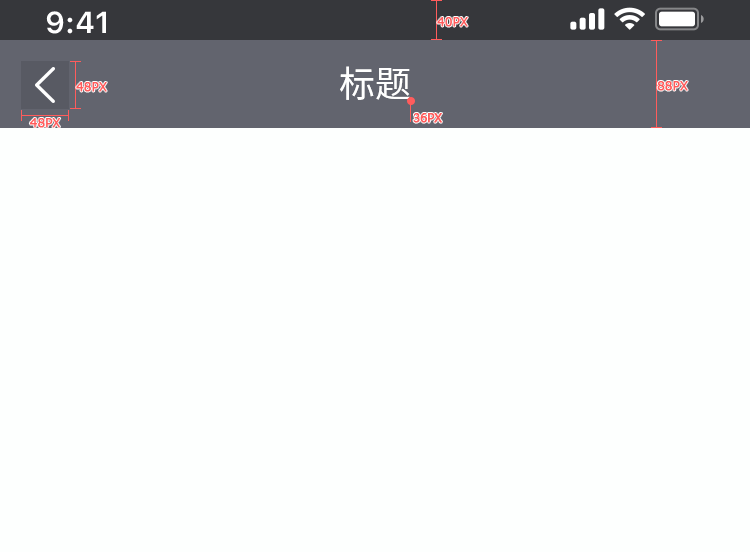
<style>
.page{position:relative;width:750px;height:552px;background:#fdfffe}
.page>*{position:absolute;margin:0}
.t1{font:12px "Verdana";color:#ff5c5c;font-weight:bold}
.t2{font:36px "SourceHanSansCN-Regular";color:#ffffff}
.t3{font:12px "MicrosoftYaHei";color:#ff5c5c;font-weight:bold}
</style>
<div class="page">
<p class="t1" style="left:437px;top:17px;width:31px;height:10px">40PX</p>
<p class="t2" style="left:340px;top:66px;width:70px;height:34px">标题</p>
<p class="t1" style="left:76px;top:82px;width:31px;height:10px">48PX</p>
<p class="t1" style="left:657px;top:81px;width:31px;height:10px">88PX</p>
<p class="t3" style="left:413px;top:113px;width:29px;height:10px">36PX</p>
<p class="t1" style="left:29px;top:118px;width:32px;height:10px">48PX</p>
</div>
